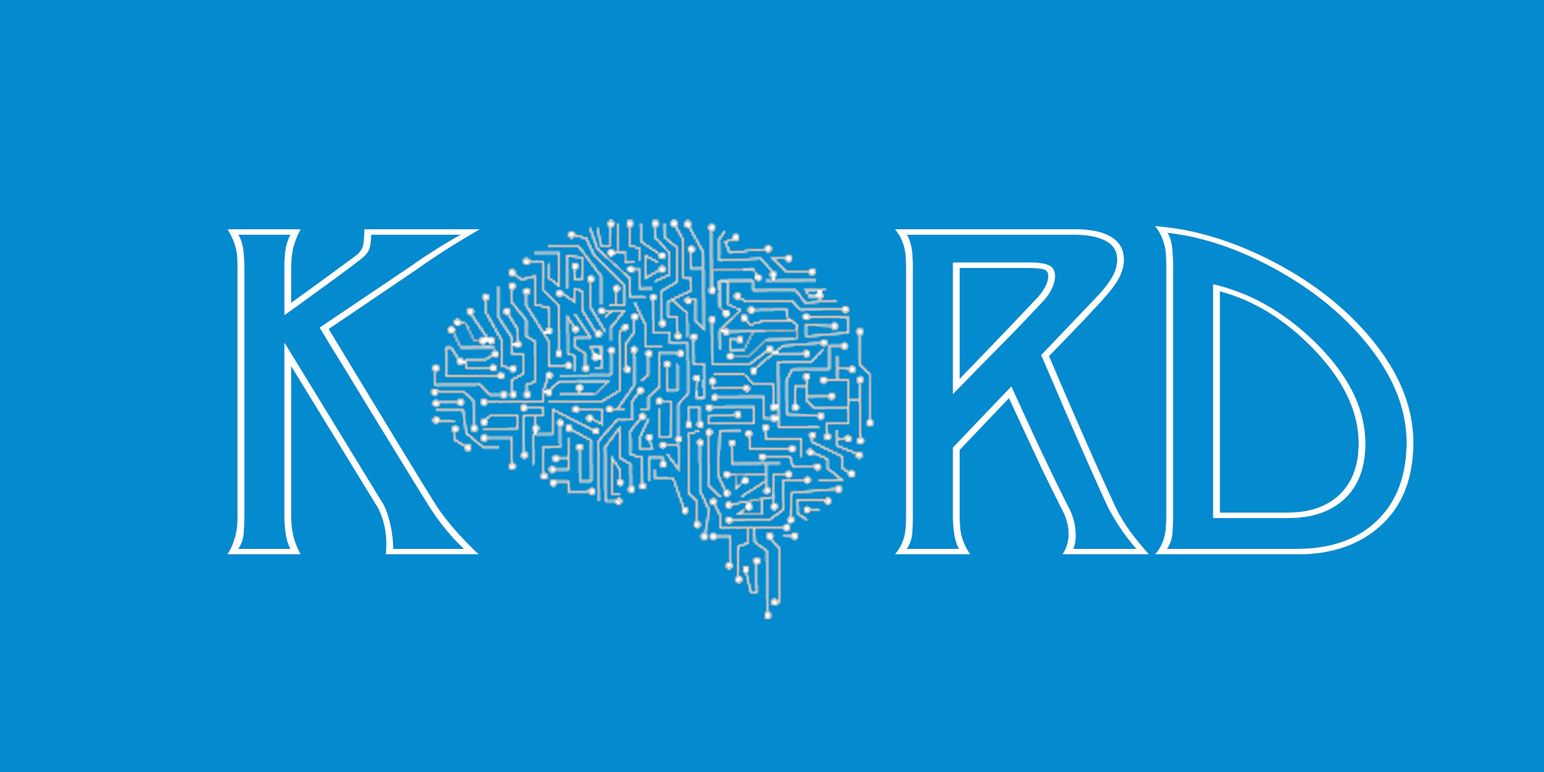
<style>
.page{position:relative;width:1544px;height:772px;background:#038acf}
.page>*{position:absolute;margin:0}
.t1{font:443.8px "Desdemona";letter-spacing:-0.05em;color:#ffffff;scale:1.27 1}
</style>
<div class="page">
<p class="t1" style="left:227px;top:226px;width:1187px;height:328px">k     rd</p>
</div>
